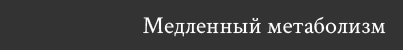
<style>
.page{position:relative;width:403px;height:50px;background:#333333}
.page>*{position:absolute;margin:0}
.t1{font:24px "CrimsonText-Regular";color:#ffffff}
</style>
<div class="page">
<p class="t1" style="left:143px;top:16px;width:243px;height:21px">Медленный метаболизм</p>
</div>
